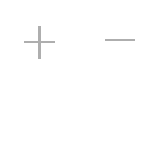
<style>
.page{position:relative;width:160px;height:160px;background:#ffffff}
.page>*{position:absolute;margin:0}
.t1{font:104px "Raleway-Thin";color:#aeaeae}
</style>
<div class="page">
<p class="t1" style="left:24px;top:26px;width:31px;height:33px">+</p>
</div>
